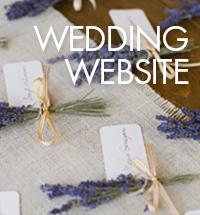
<style>
.page{position:relative;width:200px;height:215px}
.page>*{position:absolute;margin:0}
.t1{font:37.5px/33.3px "FuturaPT-Book";letter-spacing:-0.05em;color:#ffffff;text-transform:uppercase}
</style>
<div class="page">
<p class="t1" style="left:33px;top:25px;width:156px;height:60px;text-align:right">WEDDING<br>WEBSITE</p>
</div>
